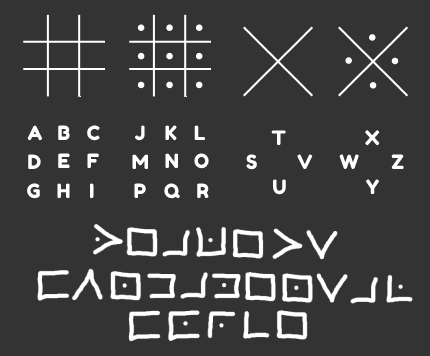
<style>
.page{position:relative;width:430px;height:356px;background:#333333}
.page>*{position:absolute;margin:0}
.t1{font:19.6px "FredokaOne-Regular";color:#ffffff}
</style>
<div class="page">
<p class="t1" style="left:27px;top:125px;width:15px;height:16px">A</p>
<p class="t1" style="left:58px;top:125px;width:12px;height:15px">B</p>
<p class="t1" style="left:87px;top:125px;width:13px;height:16px">C</p>
<p class="t1" style="left:135px;top:125px;width:10px;height:16px">J</p>
<p class="t1" style="left:165px;top:125px;width:12px;height:16px">K</p>
<p class="t1" style="left:194px;top:125px;width:11px;height:15px">L</p>
<p class="t1" style="left:271px;top:130px;width:15px;height:15px">T</p>
<p class="t1" style="left:365px;top:130px;width:15px;height:16px">X</p>
<p class="t1" style="left:28px;top:154px;width:13px;height:15px">D</p>
<p class="t1" style="left:58px;top:153px;width:12px;height:15px">E</p>
<p class="t1" style="left:87px;top:153px;width:12px;height:15px">F</p>
<p class="t1" style="left:132px;top:154px;width:16px;height:15px">M</p>
<p class="t1" style="left:165px;top:153px;width:13px;height:15px">N</p>
<p class="t1" style="left:194px;top:153px;width:15px;height:16px">O</p>
<p class="t1" style="left:246px;top:154px;width:11px;height:16px">S</p>
<p class="t1" style="left:297px;top:154px;width:16px;height:15px">V</p>
<p class="t1" style="left:339px;top:154px;width:20px;height:15px">W</p>
<p class="t1" style="left:391px;top:154px;width:13px;height:15px">Z</p>
<p class="t1" style="left:27px;top:183px;width:13px;height:16px">G</p>
<p class="t1" style="left:57px;top:183px;width:13px;height:15px">H</p>
<p class="t1" style="left:90px;top:183px;width:4px;height:15px">I</p>
<p class="t1" style="left:134px;top:183px;width:12px;height:15px">P</p>
<p class="t1" style="left:164px;top:183px;width:16px;height:16px">Q</p>
<p class="t1" style="left:197px;top:183px;width:12px;height:15px">R</p>
<p class="t1" style="left:273px;top:179px;width:13px;height:16px">U</p>
<p class="t1" style="left:366px;top:179px;width:13px;height:15px">Y</p>
</div>
